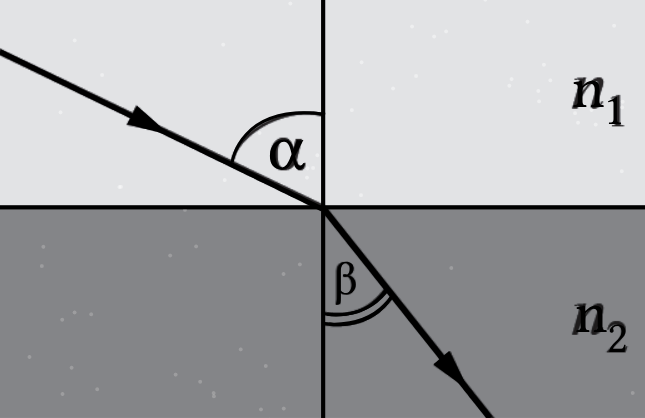
<style>
.page{position:relative;width:645px;height:418px;background:#848588}
.page>*{position:absolute;margin:0}
.t1{font:60px "LibertinusMath-Regular";color:#000000}
.t2{font:45px "LibertinusMath-Regular";color:#000000}
.t3{font:67px "LibertinusMath-Regular";color:#000000}
.t4{font:46.3px "LibertinusMath-Regular";color:#000000}
</style>
<div class="page">
<p class="t1" style="left:573px;top:80px;width:31px;height:28px">n</p>
<p class="t2" style="left:608px;top:96px;width:14px;height:29px">1</p>
<p class="t3" style="left:269px;top:139px;width:37px;height:31px">α</p>
<p class="t4" style="left:336px;top:261px;width:20px;height:44px">β</p>
<p class="t1" style="left:576px;top:305px;width:31px;height:28px">n</p>
<p class="t2" style="left:609px;top:324px;width:17px;height:29px">2</p>
</div>
